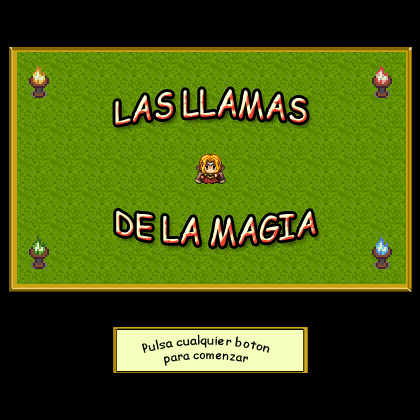
<style>
.page{position:relative;width:420px;height:420px;background:#000000}
.page>*{position:absolute;margin:0}
.t1{font:30px "ComicSansMS"}
.t2{font:12px "ComicSansMS";color:#000000}
</style>
<div class="page">
<p class="t1" style="left:115px;top:89px;width:201px;height:158px;text-align:center">LAS LLAMAS <br><br><br>DE LA MAGIA</p>
<p class="t2" style="left:142px;top:334px;width:128px;height:32px;text-align:center">Pulsa cualquier boton<br>para comenzar</p>
</div>
